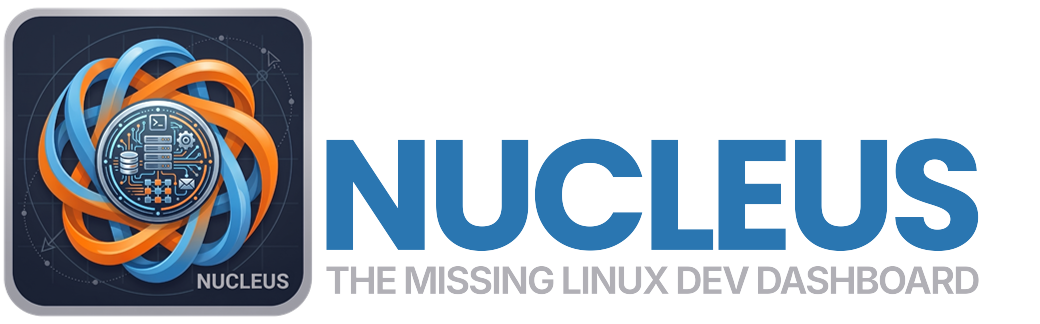
<style>
.page{position:relative;width:1040px;height:324px;background:#ffffff}
.page>*{position:absolute;margin:0}
.t1{font:157.1px "Poppins-Bold";letter-spacing:-0.05em;color:#2a76b1;text-transform:uppercase}
.t2{font:38px "Lato-Bold";letter-spacing:-0.05em;color:#b1b0b6;text-transform:uppercase}
</style>
<div class="page">
<p class="t1" style="left:325px;top:138px;width:655px;height:115px">NUCLEUS</p>
<p class="t2" style="left:325px;top:265px;width:655px;height:31px">THE MISSING LINUX DEV DASHBOARD</p>
</div>
